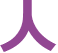
<style>
.page{position:relative;width:58px;height:53px;background:#ffffff}
.page>*{position:absolute;margin:0}
.t1{font:60px "Meiryo-Bold";color:#924792}
</style>
<div class="page">
<p class="t1" style="left:0px;top:0px;width:57px;height:52px">人</p>
</div>
